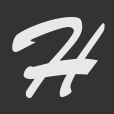
<style>
.page{position:relative;width:114px;height:114px;background:#333333}
.page>*{position:absolute;margin:0}
.t1{font:122px "BrushScriptMT";color:#e8e8e8}
</style>
<div class="page">
<p class="t1" style="left:12px;top:17px;width:93px;height:81px">H</p>
</div>
